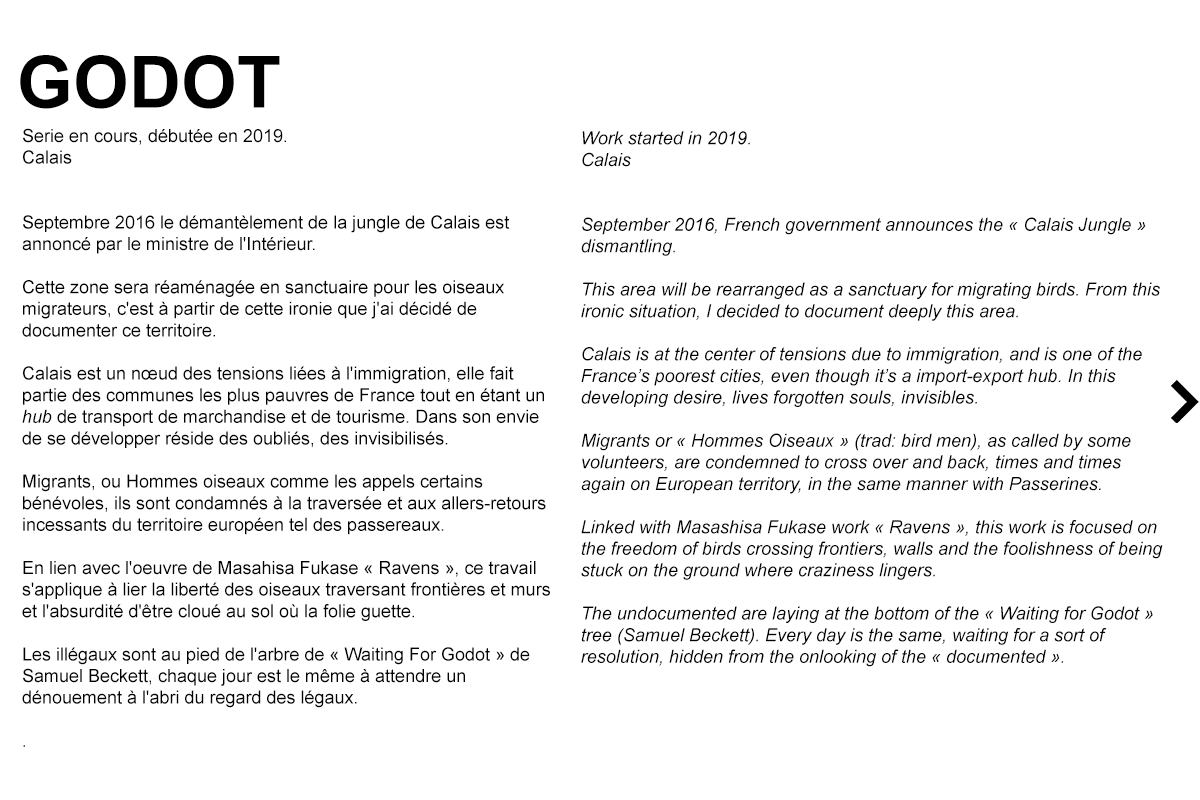
<style>
.page{position:relative;width:1200px;height:800px;background:#ffffff}
.page>*{position:absolute;margin:0}
.t1{font:72px "Arial-BoldMT";color:#000000}
.t2{font:18px "ArialMT";color:#000000}
.t3{font:18px "Arial-ItalicMT";color:#000000}
</style>
<div class="page">
<p class="t1" style="left:20px;top:55px;width:260px;height:54px">GODOT</p>
<p class="t2" style="left:22px;top:128px;width:528px;height:619px">Serie en cours, débutée en 2019.<br>Calais<br><br><br>Septembre 2016 le démantèlement de la jungle de Calais est annoncé par le ministre de l'Intérieur.<br><br>Cette zone sera réaménagée en sanctuaire pour les oiseaux migrateurs, c'est à partir de cette ironie que j'ai décidé de documenter ce territoire.<br><br>Calais est un nœud des tensions liées à l'immigration, elle fait partie des communes les plus pauvres de France tout en étant un <span class="t3">hub</span> de transport de marchandise et de tourisme. Dans son envie de se développer réside des oubliés, des invisibilisés.<br><br>Migrants, ou Hommes oiseaux comme les appels certains bénévoles, ils sont condamnés à la traversée et aux allers-retours incessants du territoire européen tel des passereaux.<br><br>En lien avec l'oeuvre de Masahisa Fukase « Ravens », ce travail s'applique à lier la liberté des oiseaux traversant frontières et murs et l'absurdité d'être cloué au sol où la folie guette.<br><br>Les illégaux sont au pied de l'arbre de « Waiting For Godot » de Samuel Beckett, chaque jour est le même à attendre un dénouement à l'abri du regard des légaux.<br><br>.</p>
<p class="t3" style="left:581px;top:131px;width:582px;height:536px">Work started in 2019.<br>Calais<br><br><br>September 2016, French government announces the « Calais Jungle » dismantling. <br><br>This area will be rearranged as a sanctuary for migrating birds. From this ironic situation, I decided to document deeply this area. <br><br>Calais is at the center of tensions due to immigration, and is one of the France’s poorest cities, even though it’s a import-export hub. In this developing desire, lives forgotten souls, invisibles. <br><br>Migrants or « Hommes Oiseaux » (trad: bird men), as called by some volunteers, are condemned to cross over and back, times and times again on European territory, in the same manner with Passerines. <br><br>Linked with Masashisa Fukase work « Ravens », this work is focused on the freedom of birds crossing frontiers, walls and the foolishness of being stuck on the ground where craziness lingers. <br><br>The undocumented are laying at the bottom of the « Waiting for Godot » tree (Samuel Beckett). Every day is the same, waiting for a sort of resolution, hidden from the onlooking of the « documented ».</p>
</div>
